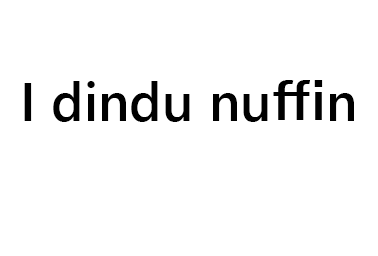
<style>
.page{position:relative;width:378px;height:256px;background:#ffffff}
.page>*{position:absolute;margin:0}
.t1{font:54.2px "YuGothicUI-Semibold";color:#000000}
.t2{font:50px "YuGothicUI-Semibold";color:#000000}
</style>
<div class="page">
<p class="t1" style="left:24px;top:80px;width:330px;height:42px"><span class="t2"><br></span>I dindu nuffin</p>
</div>
